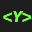
<style>
.page{position:relative;width:32px;height:32px;background:#1e1e1e}
.page>*{position:absolute;margin:0}
.t1{font:16px "AlibabaSans-BoldItalic";color:#73ff3c}
</style>
<div class="page">
<p class="t1" style="left:3px;top:10px;width:29px;height:12px">&lt;Y&gt;</p>
</div>
